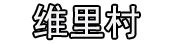
<style>
.page{position:relative;width:171px;height:44px;background:#ffffff}
.page>*{position:absolute;margin:0}
.t1{font:36px "SimHei";color:#f4f4f7}
</style>
<div class="page">
<p class="t1" style="left:33px;top:5px;width:106px;height:34px">维里村</p>
</div>
